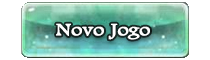
<style>
.page{position:relative;width:210px;height:60px;background:#ffffff}
.page>*{position:absolute;margin:0}
.t1{font:17.6px "FootlightMTLight";color:#ffffff;font-weight:bold;scale:1.25 1}
</style>
<div class="page">
<p class="t1" style="left:56px;top:23px;width:94px;height:17px">Novo Jogo</p>
</div>
